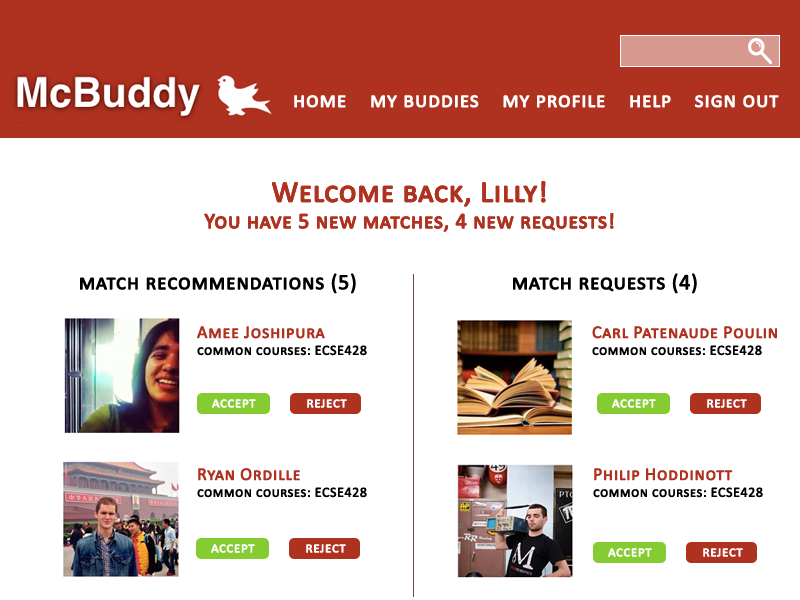
<style>
.page{position:relative;width:800px;height:600px;background:#ffffff}
.page>*{position:absolute;margin:0}
.t1{font:22px "Calibri";letter-spacing:0.005em;color:#ffffff;font-variant:small-caps;font-weight:bold}
.t2{font:22px "Calibri";letter-spacing:0.005em;color:#af3120;font-variant:small-caps;font-weight:bold}
.t3{font:30px "Calibri";letter-spacing:0.005em;color:#af3120;font-variant:small-caps;font-weight:bold}
.t4{font:22px "Calibri";letter-spacing:0.005em;color:#000000;font-variant:small-caps;font-weight:bold}
.t5{font:14px "Calibri";letter-spacing:0.005em;color:#000000;font-variant:small-caps;font-weight:bold}
.t6{font:18px "Calibri";letter-spacing:0.005em;color:#af3120;font-variant:small-caps;font-weight:bold}
.t7{font:15px "Calibri";letter-spacing:0.005em;color:#ffffff;font-variant:small-caps;font-weight:bold}
</style>
<div class="page">
<p class="t1" style="left:294px;top:95px;width:485px;height:13px">home    my buddies    my profile    help    sign out</p>
<p class="t2" style="left:204px;top:181px;width:410px;height:51px;text-align:center"><span class="t3">Welcome back, Lilly!<br></span>You have 5 new matches, 4 new requests!</p>
<p class="t2" style="left:204px;top:181px;width:410px;height:51px;text-align:center"><span class="t3">Welcome back, Lilly!<br></span>You have 5 new matches, 4 new requests!</p>
<p class="t4" style="left:80px;top:273px;width:276px;height:21px">match recommendations (5)</p>
<p class="t4" style="left:513px;top:273px;width:184px;height:21px">match requests (4)</p>
<p class="t5" style="left:197px;top:326px;width:170px;height:30px"><span class="t6">Amee Joshipura<br></span>common courses: ECSE428</p>
<p class="t5" style="left:592px;top:326px;width:185px;height:30px"><span class="t6">Carl Patenaude Poulin<br></span>common courses: ECSE428</p>
<p class="t7" style="left:212px;top:399px;width:135px;height:9px">accept             reject</p>
<p class="t7" style="left:612px;top:399px;width:135px;height:9px">accept             reject</p>
<p class="t5" style="left:197px;top:468px;width:170px;height:30px"><span class="t6">Ryan Ordille<br></span>common courses: ECSE428</p>
<p class="t5" style="left:593px;top:468px;width:170px;height:30px"><span class="t6">Philip Hoddinott<br></span>common courses: ECSE428</p>
<p class="t7" style="left:211px;top:544px;width:135px;height:9px">accept             reject</p>
<p class="t7" style="left:608px;top:548px;width:135px;height:9px">accept             reject</p>
</div>
